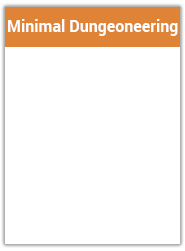
<style>
.page{position:relative;width:185px;height:251px;background:#ffffff}
.page>*{position:absolute;margin:0}
.t1{font:16px "Roboto-Bold";color:#ffffff}
</style>
<div class="page">
<p class="t1" style="left:8px;top:19px;width:170px;height:17px">Minimal Dungeoneering</p>
</div>
